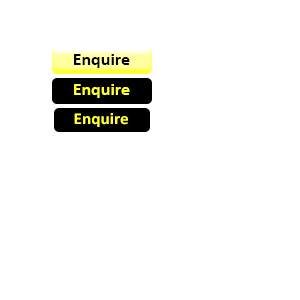
<style>
.page{position:relative;width:300px;height:300px;background:#ffffff}
.page>*{position:absolute;margin:0}
.t1{font:18px "Calibri-Bold";color:#000000}
.t2{font:18px "Calibri-Bold";color:#ffff32}
.t3{font:16.6px "Calibri-Bold";color:#ffff32;scale:1.04 1}
</style>
<div class="page">
<p class="t1" style="left:74px;top:54px;width:56px;height:14px">Enquire</p>
<p class="t2" style="left:74px;top:84px;width:56px;height:14px">Enquire</p>
<p class="t3" style="left:74px;top:113px;width:54px;height:14px">Enquire</p>
</div>
